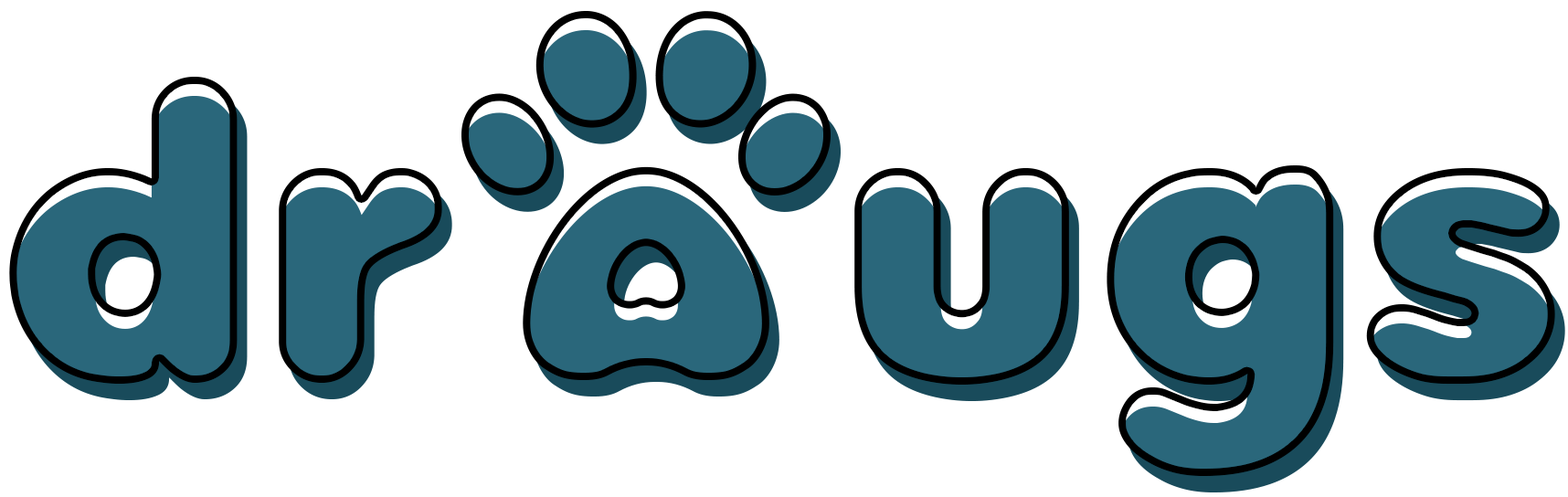
<style>
.page{position:relative;width:1568px;height:497px;background:#ffffff}
.page>*{position:absolute;margin:0}
.t1{font:386.2px "Valken";letter-spacing:0.05em;color:#2a677b}
</style>
<div class="page">
<p class="t1" style="left:9px;top:77px;width:1546px;height:399px">dr   ugs</p>
</div>
